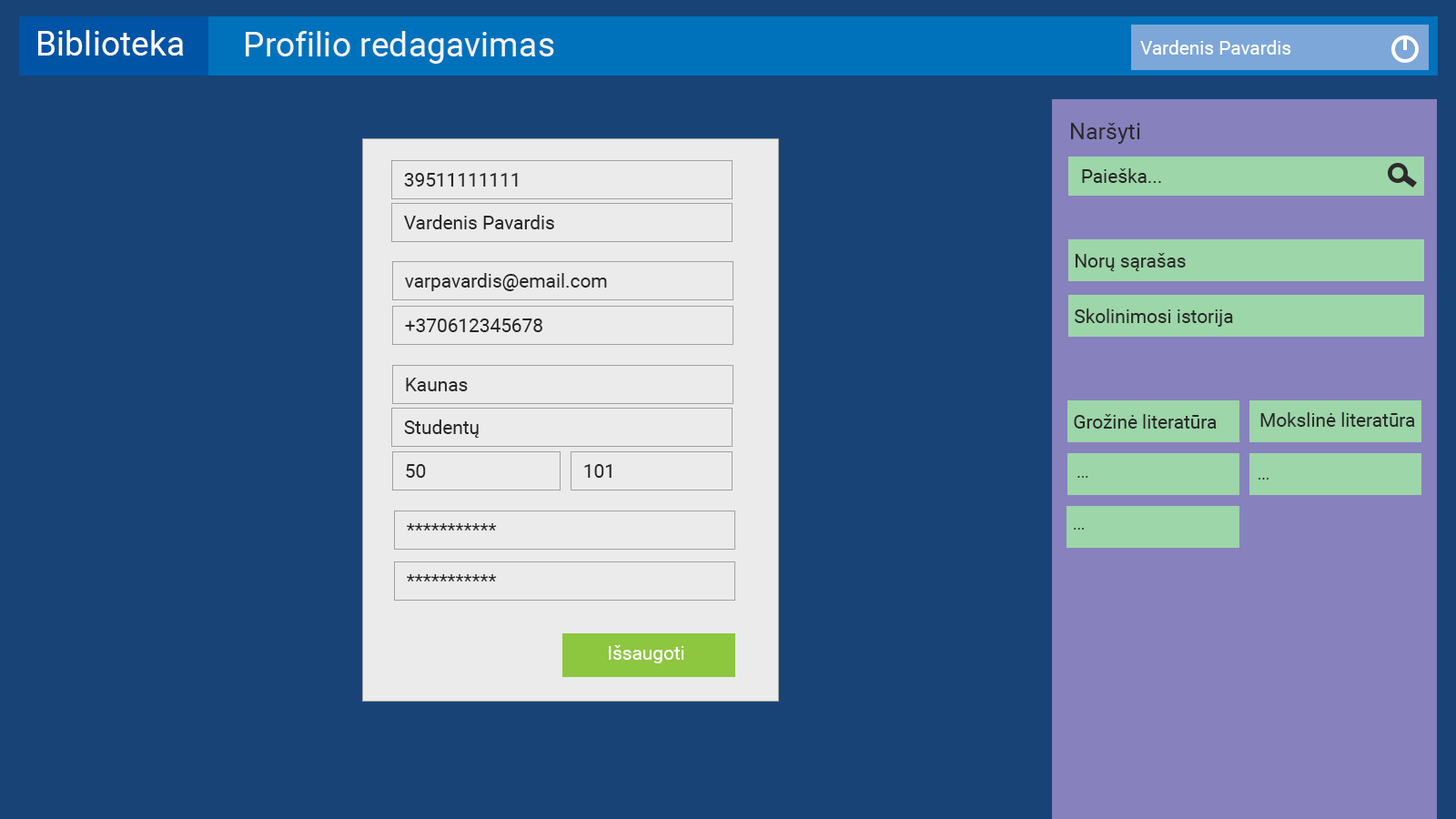
<style>
.page{position:relative;width:1456px;height:819px;background:#184377}
.page>*{position:absolute;margin:0}
.t1{font:34.1px "Roboto-Regular";color:#ffffff}
.t2{font:34.1px "Roboto-Regular";color:#f2f2f2}
.t3{font:19px "Roboto-Regular";color:#ffffff}
.t4{font:22.7px "Roboto-Regular";color:#292929}
.t5{font:19px "Roboto-Regular";color:#262626}
.t6{font:19px "Roboto-Regular";color:#292929}
.t7{font:15.2px "Roboto-Regular";color:#292929}
</style>
<div class="page">
<p class="t1" style="left:38px;top:30px;width:146px;height:26px">Biblioteka</p>
<p class="t2" style="left:246px;top:31px;width:308px;height:33px">Profilio redagavimas</p>
<p class="t3" style="left:1140px;top:40px;width:151px;height:15px">Vardenis Pavardis</p>
<p class="t4" style="left:1071px;top:123px;width:69px;height:21px">Naršyti</p>
<p class="t5" style="left:404px;top:173px;width:114px;height:14px">39511111111</p>
<p class="t5" style="left:1082px;top:168px;width:79px;height:15px">Paieška...</p>
<p class="t5" style="left:404px;top:215px;width:150px;height:14px">Vardenis Pavardis</p>
<p class="t6" style="left:1075px;top:253px;width:111px;height:18px">Norų sąrašas</p>
<p class="t5" style="left:405px;top:273px;width:202px;height:18px">varpavardis@email.com</p>
<p class="t6" style="left:1075px;top:308px;width:158px;height:19px">Skolinimosi istorija</p>
<p class="t5" style="left:405px;top:318px;width:137px;height:14px">+370612345678</p>
<p class="t5" style="left:406px;top:378px;width:62px;height:13px">Kaunas</p>
<p class="t6" style="left:1260px;top:412px;width:155px;height:15px">Mokslinė literatūra</p>
<p class="t5" style="left:404px;top:420px;width:75px;height:18px">Studentų</p>
<p class="t6" style="left:1074px;top:414px;width:143px;height:15px">Grožinė literatūra</p>
<p class="t5" style="left:406px;top:464px;width:20px;height:14px">50</p>
<p class="t5" style="left:584px;top:464px;width:28px;height:14px">101</p>
<p class="t7" style="left:1077px;top:476px;width:11px;height:2px">...</p>
<p class="t7" style="left:1259px;top:478px;width:10px;height:2px">...</p>
<p class="t5" style="left:407px;top:523px;width:90px;height:8px">***********</p>
<p class="t7" style="left:1074px;top:528px;width:10px;height:2px">...</p>
<p class="t5" style="left:407px;top:574px;width:90px;height:7px">***********</p>
<p class="t3" style="left:609px;top:645px;width:75px;height:18px">Išsaugoti</p>
</div>
